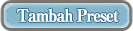
<style>
.page{position:relative;width:133px;height:31px;background:#86b7cd}
.page>*{position:absolute;margin:0}
.t1{font:17px "RyuminPro-ExBold";letter-spacing:-0.08em;color:#ffffff;font-weight:bold;scale:0.9 1}
</style>
<div class="page">
<p class="t1" style="left:16px;top:8px;width:103px;height:14px">Tambah Preset</p>
</div>
